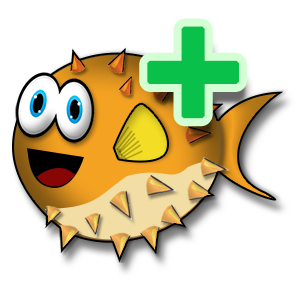
<style>
.page{position:relative;width:300px;height:300px;background:#ffffff}
.page>*{position:absolute;margin:0}
.t1{font:172px "HelveticaNeue-Bold";color:#09c14a;font-weight:bold}
</style>
<div class="page">
<p class="t1" style="left:147px;top:26px;width:92px;height:93px">+</p>
</div>
